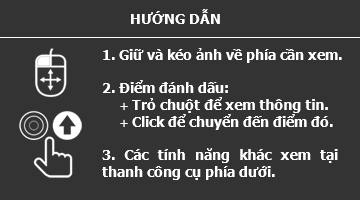
<style>
.page{position:relative;width:360px;height:200px;background:#333333}
.page>*{position:absolute;margin:0}
.t1{font:14px "Tahoma-Bold";color:#ffffff}
.t2{font:14px "MyriadPro-Regular";color:#ffffff}
</style>
<div class="page">
<p class="t1" style="left:102px;top:9px;width:240px;height:171px">HƯỚNG DẪN<br><br><br>1. Giữ và kéo ảnh về phía cần xem.<br><br>2. Điểm đánh dấu: <br><span class="t2">      +</span> Trỏ chuột để xem thông tin.<br><span class="t2">      +</span> Click để chuyển đến điểm đó.<br><br>3. Các tính năng khác xem tại thanh công cụ phía dưới.</p>
</div>
